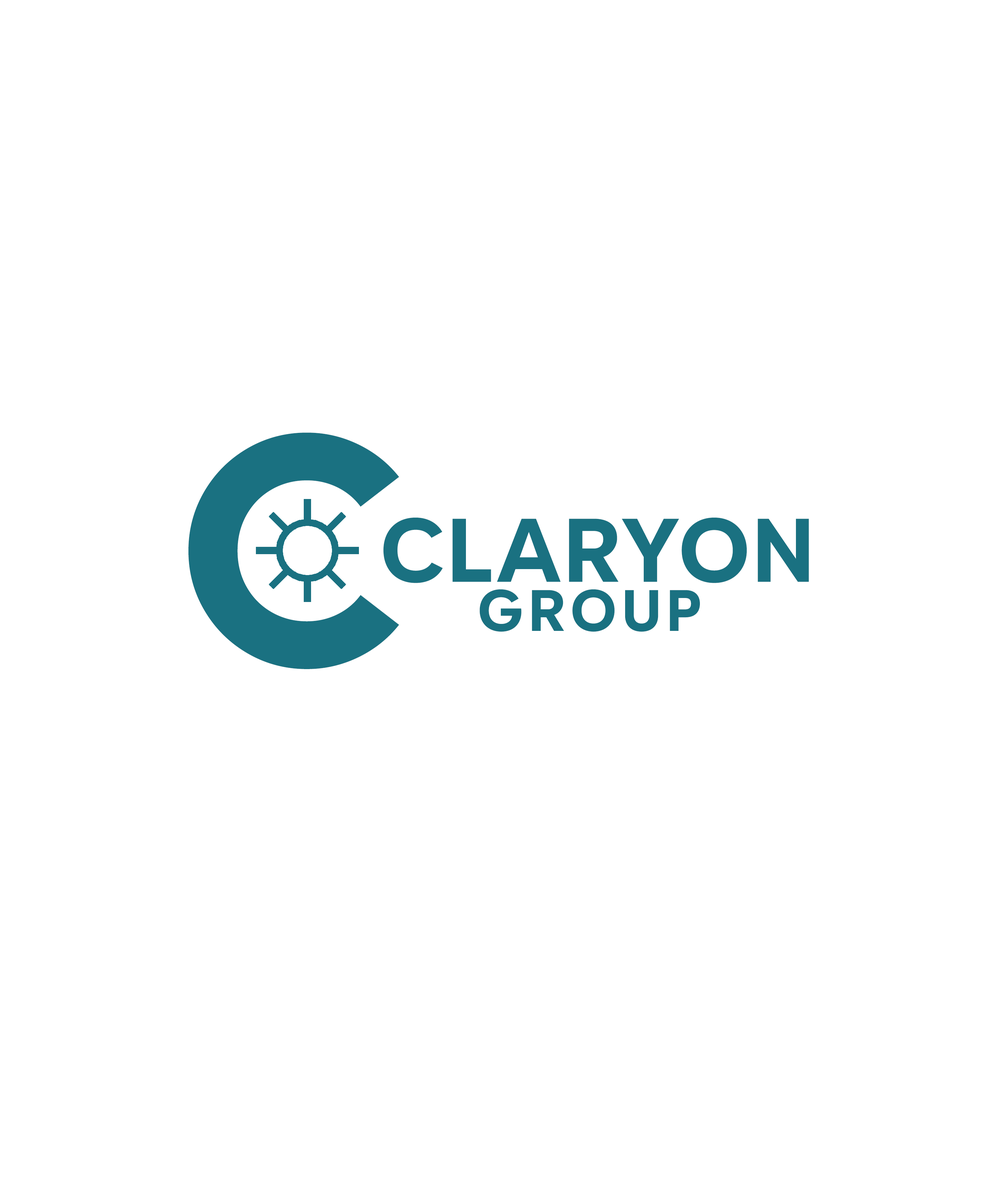
<style>
.page{position:relative;width:997px;height:1196px;background:#ffffff}
.page>*{position:absolute;margin:0}
.t1{font:307.3px "NeueHansKendrick-ExtraBold";letter-spacing:-0.02em;color:#1a7181;text-transform:uppercase}
.t2{font:90px "FONTSPRINGDEMO-BoldBold";letter-spacing:0.02em;color:#1a7181;text-transform:uppercase}
.t3{font:58.1px "FONTSPRINGDEMO-BoldBold";letter-spacing:0.08em;color:#1a7181;text-transform:uppercase}
</style>
<div class="page">
<p class="t1" style="left:188px;top:433px;width:211px;height:236px">C</p>
<p class="t2" style="left:383px;top:518px;width:426px;height:65px">CLARYON</p>
<p class="t3" style="left:479px;top:589px;width:221px;height:43px">GRoup</p>
</div>
